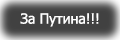
<style>
.page{position:relative;width:120px;height:40px;background:#414141}
.page>*{position:absolute;margin:0}
.t1{font:14px "Tahoma";color:#ffffff}
</style>
<div class="page">
<p class="t1" style="left:20px;top:13px;width:79px;height:14px">За Путина!!!</p>
</div>
